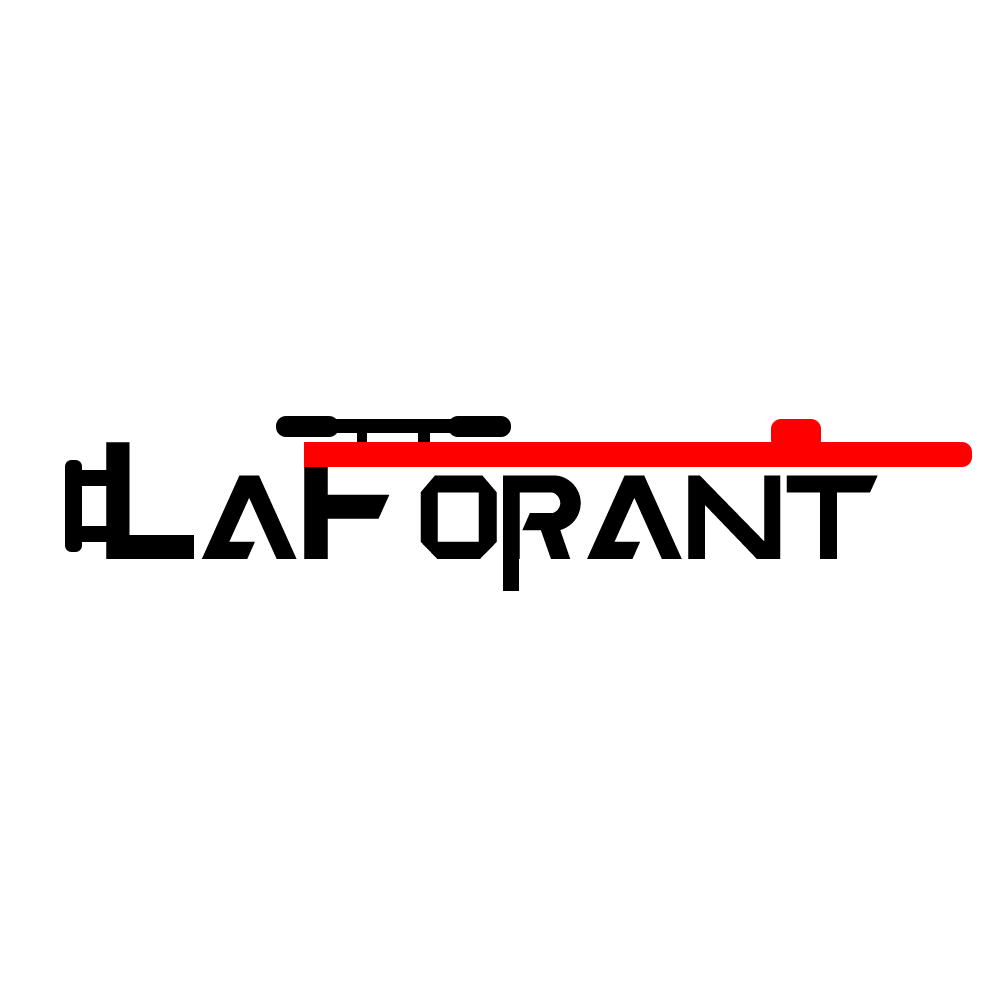
<style>
.page{position:relative;width:1000px;height:1000px;background:#ffffff}
.page>*{position:absolute;margin:0}
.t1{font:83.3px "TITANFALLFRONTLINE";color:#000000}
.t2{font:116.7px "TITANFALLFRONTLINE";color:#000000}
</style>
<div class="page">
<p class="t1" style="left:106px;top:442px;width:772px;height:117px"><span class="t2">L</span>a<span class="t2">f</span>orant</p>
</div>
